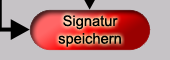
<style>
.page{position:relative;width:170px;height:60px;background:#c6c3c6}
.page>*{position:absolute;margin:0}
.t1{font:14.7px "ArialMT";color:#000000}
</style>
<div class="page">
<p class="t1" style="left:58px;top:15px;width:63px;height:32px;text-align:center">Signatur <br>speichern</p>
</div>
